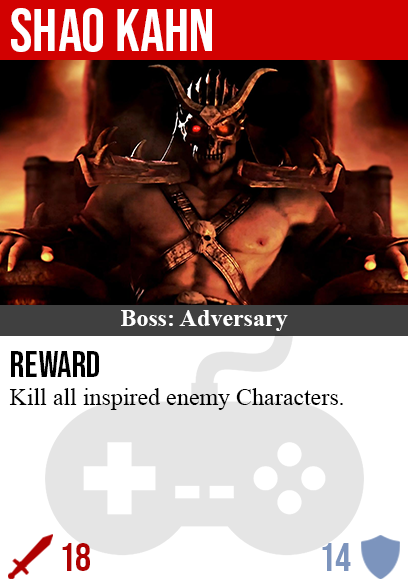
<style>
.page{position:relative;width:408px;height:585px;background:#ffffff}
.page>*{position:absolute;margin:0}
.t1{font:60px "BebasNeue-Regular";color:#ffffff}
.t2{font:24px "TimesNewRomanPS-BoldMT";color:#ffffff}
.t3{font:36px "BebasNeue-Regular";color:#000000}
.t4{font:24px "TimesNewRomanPSMT";color:#000000}
.t5{font:40px "BebasNeue-Regular";color:#af0202}
.t6{font:40px "BebasNeue-Regular";color:#7c94bd}
</style>
<div class="page">
<p class="t1" style="left:11px;top:8px;width:201px;height:44px">shao kahn</p>
<p class="t2" style="left:121px;top:310px;width:167px;height:21px">Boss: Adversary</p>
<p class="t3" style="left:11px;top:351px;width:88px;height:26px">reward</p>
<p class="t4" style="left:9px;top:388px;width:334px;height:22px">Kill all inspired enemy Characters.</p>
<p class="t5" style="left:62px;top:543px;width:28px;height:28px">18</p>
<p class="t6" style="left:322px;top:543px;width:29px;height:28px">14</p>
</div>
